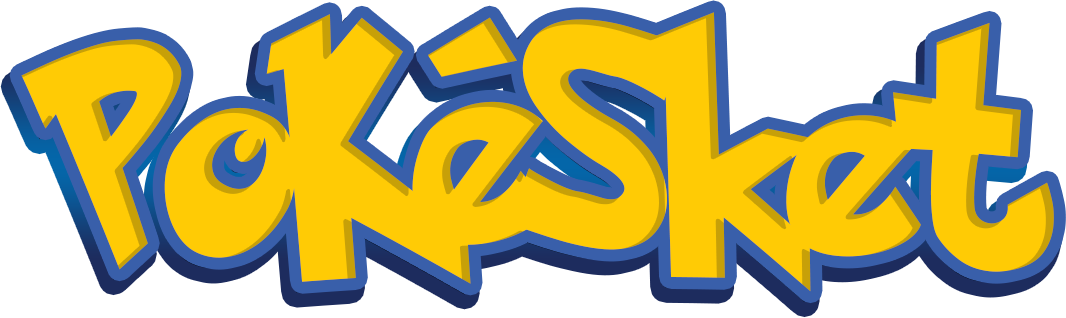
<style>
.page{position:relative;width:1066px;height:318px;background:#ffcb05}
.page>*{position:absolute;margin:0}
.t1{font:251.5px "PokemonSolidNormal";color:#ffcb05;scale:0.86 1}
</style>
<div class="page">
<p class="t1" style="left:21px;top:12px;width:1033px;height:280px">PoKéSket</p>
<p class="t1" style="left:15px;top:23px;width:1033px;height:280px">PoKéSket</p>
</div>
